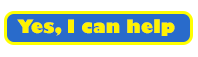
<style>
.page{position:relative;width:198px;height:57px;background:#ffffff}
.page>*{position:absolute;margin:0}
.t1{font:18px "GillSans-UltraBold";color:#fff200}
</style>
<div class="page">
<p class="t1" style="left:17px;top:19px;width:158px;height:17px">Yes, I can help</p>
</div>
